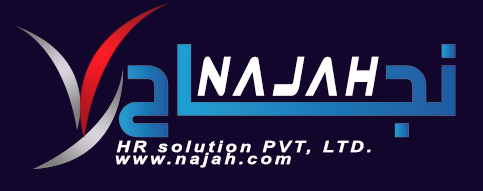
<style>
.page{position:relative;width:483px;height:191px;background:#12062c}
.page>*{position:absolute;margin:0}
.t1{font:58.9px "PilotCommandCondensedItalic";letter-spacing:0.16em;color:#ffffff;scale:0.7 1}
.t2{font:15.5px "Arial-BoldItalicMT";letter-spacing:0.16em;color:#ffffff;scale:1.2 1}
</style>
<div class="page">
<p class="t1" style="left:197px;top:56px;width:182px;height:40px">Najah</p>
<p class="t2" style="left:116px;top:140px;width:255px;height:15px">HR solution PVT, LTD.</p>
<p class="t2" style="left:115px;top:152px;width:176px;height:16px">www.najah.com</p>
</div>
